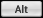
<style>
.page{position:relative;width:43px;height:18px}
.page>*{position:absolute;margin:0}
.t1{font:11px "MyriadPro-Regular"}
</style>
<div class="page">
<p class="t1" style="left:15px;top:5px;width:13px;height:8px">Alt</p>
</div>
